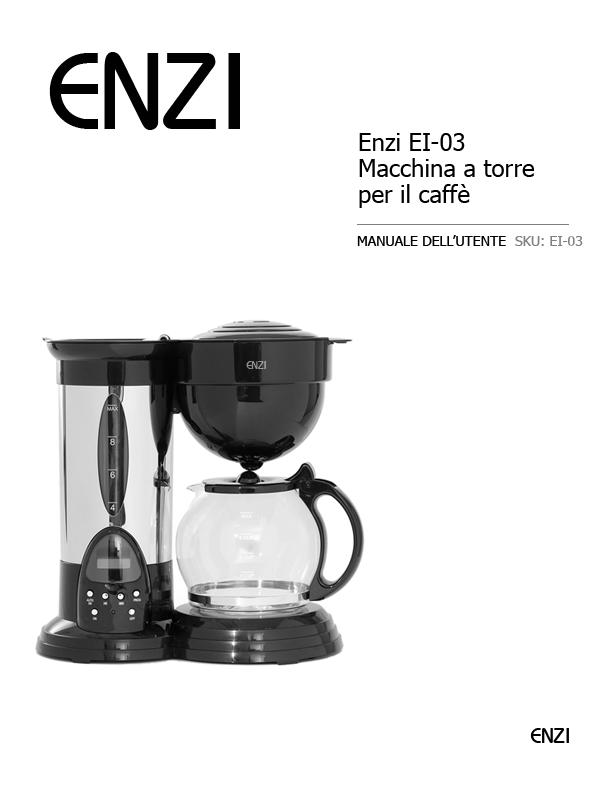
<style>
.page{position:relative;width:612px;height:792px;background:#ffffff}
.page>*{position:absolute;margin:0}
.t1{font:24px/26px "Tahoma";color:#010101}
.t2{font:14px "Tahoma";color:#010101;text-transform:uppercase}
.t3{font:14px "Tahoma";color:#808080;text-transform:uppercase}
</style>
<div class="page">
<p class="t1" style="left:359px;top:133px;width:175px;height:75px">Enzi EI-03 <br>Macchina a torre <br>per il caffè</p>
<p class="t2" style="left:357px;top:235px;width:149px;height:11px">MANUALE DELL’UTENTE</p>
<p class="t3" style="left:515px;top:236px;width:68px;height:10px">SKU: EI-03</p>
</div>
